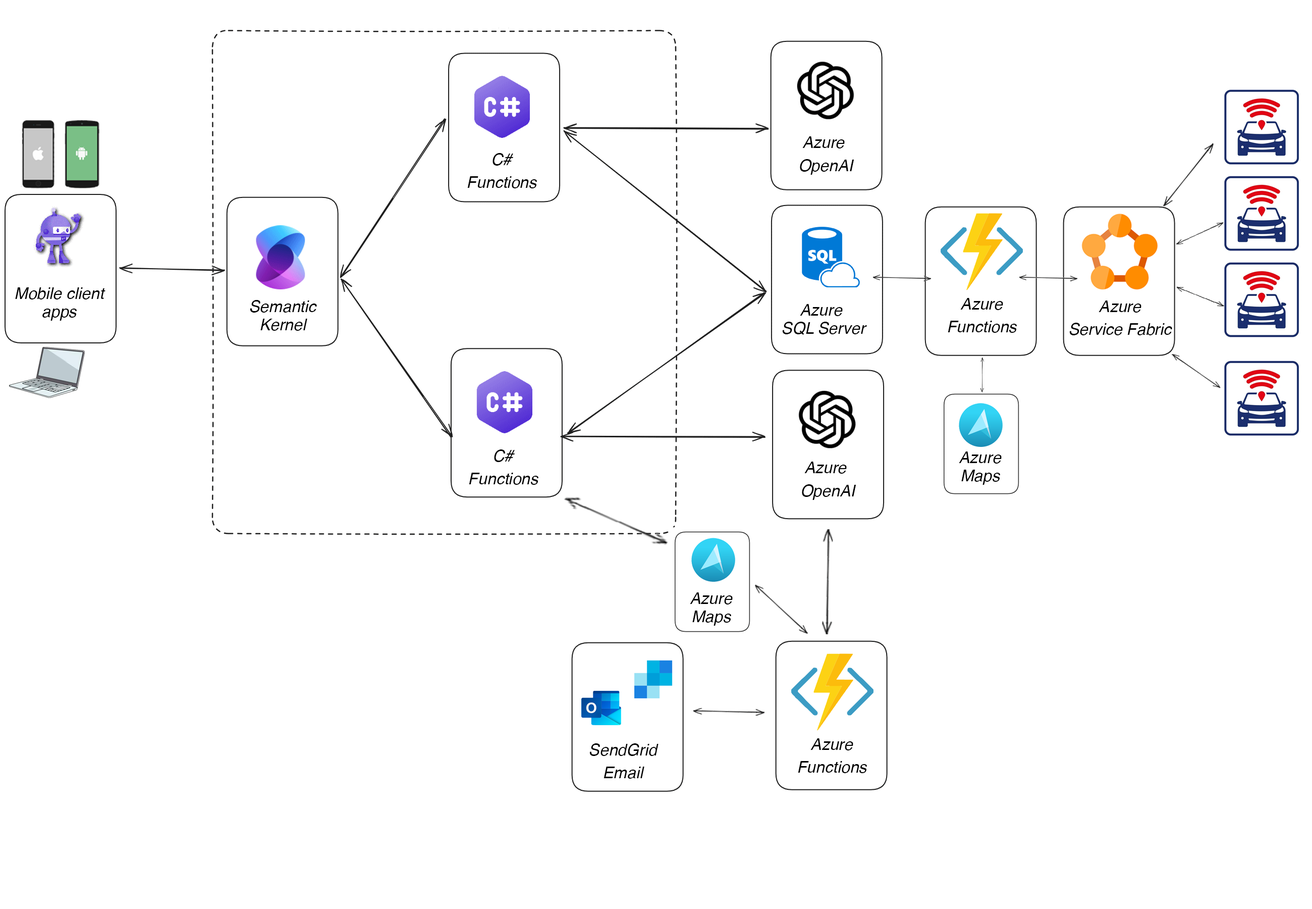
<style>
.page{position:relative;width:1312px;height:909px;background:#ffffff}
.page>*{position:absolute;margin:0}
.t1{font:16.2px/4.6px "Helvetica-Oblique";color:#000000}
</style>
<div class="page">
<p class="t1" style="left:800px;top:136px;width:55px;height:39px;text-align:center">Azure <br><br><br><br><br>OpenAI</p>
<p class="t1" style="left:467px;top:153px;width:70px;height:35px;text-align:center">C#<br><br><br><br><br>Functions</p>
<p class="t1" style="left:15px;top:287px;width:90px;height:34px;text-align:center">Mobile client<br><br><br><br>apps</p>
<p class="t1" style="left:250px;top:300px;width:67px;height:31px;text-align:center">Semantic<br><br><br><br>Kernel</p>
<p class="t1" style="left:782px;top:304px;width:85px;height:31px;text-align:center">Azure <br><br><br><br>SQL Server</p>
<p class="t1" style="left:948px;top:298px;width:69px;height:35px;text-align:center">Azure<br><br><br><br><br>Functions</p>
<p class="t1" style="left:1070px;top:300px;width:103px;height:35px;text-align:center">Azure<br><br><br><br><br>Service Fabric</p>
<p class="t1" style="left:469px;top:449px;width:70px;height:36px;text-align:center">C#<br><br><br><br><br>Functions</p>
<p class="t1" style="left:802px;top:461px;width:55px;height:39px;text-align:center">Azure <br><br><br><br><br>OpenAI</p>
<p class="t1" style="left:959px;top:451px;width:43px;height:34px;text-align:center">Azure<br><br><br><br>Maps</p>
<p class="t1" style="left:690px;top:592px;width:43px;height:33px;text-align:center">Azure<br><br><br><br>Maps</p>
<p class="t1" style="left:798px;top:738px;width:69px;height:35px;text-align:center">Azure<br><br><br><br><br>Functions</p>
<p class="t1" style="left:590px;top:743px;width:69px;height:35px;text-align:center">SendGrid<br><br><br><br><br>Email</p>
</div>
